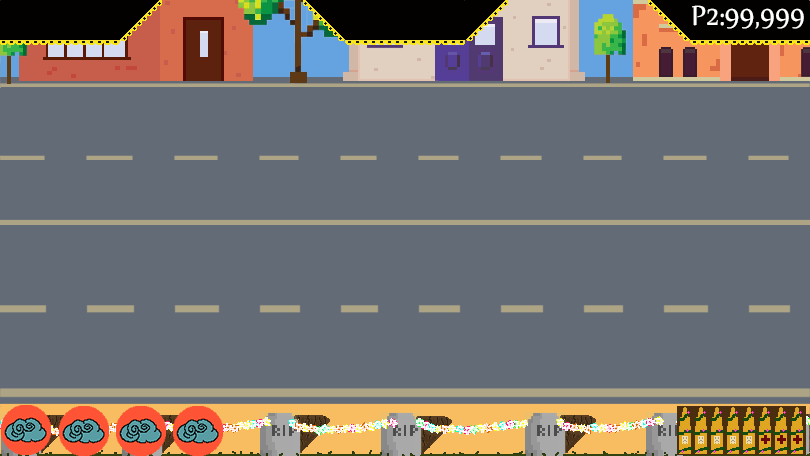
<style>
.page{position:relative;width:810px;height:456px;background:#636b77}
.page>*{position:absolute;margin:0}
.t1{font:33.3px "Nyala-Regular";color:#ffffff;scale:0.9 1}
</style>
<div class="page">
<p class="t1" style="left:692px;top:5px;width:112px;height:24px">P2:99,999</p>
</div>
